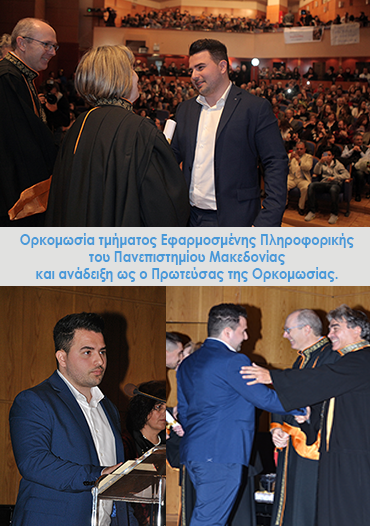
<style>
.page{position:relative;width:370px;height:526px}
.page>*{position:absolute;margin:0}
.t1{font:25.6px/17.3px "CenturyGothic-Bold";color:#4799d9;scale:0.87 1}
</style>
<div class="page">
<p class="t1" style="left:20px;top:233px;width:334px;height:49px;text-align:center">Ορκομωσία τμήματος Εφαρμοσμένης Πληροφορικής<br>του Πανεπιστημίου Μακεδονίας<br>και ανάδειξη ως ο Πρωτεύσας της Ορκομωσίας.</p>
</div>
